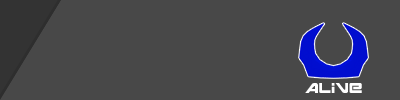
<style>
.page{position:relative;width:400px;height:100px;background:#484848}
.page>*{position:absolute;margin:0}
.t1{font:20px "SpaceRanger";color:#ffffff}
</style>
<div class="page">
<p class="t1" style="left:305px;top:83px;width:57px;height:10px">ALIVE</p>
</div>
